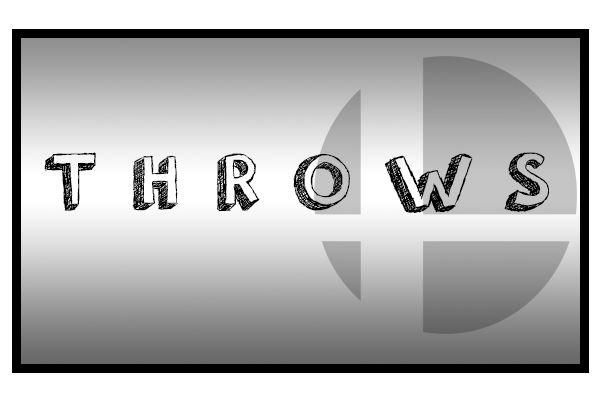
<style>
.page{position:relative;width:600px;height:400px}
.page>*{position:absolute;margin:0}
.t1{font:80px "orangejuice";letter-spacing:0.5em;color:#000000;text-transform:uppercase}
</style>
<div class="page">
<p class="t1" style="left:44px;top:152px;width:505px;height:61px">throws</p>
</div>
